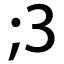
<style>
.page{position:relative;width:64px;height:64px;background:#ffffff}
.page>*{position:absolute;margin:0}
.t1{font:72px "MyriadPro-Regular";color:#000000}
</style>
<div class="page">
<p class="t1" style="left:8px;top:3px;width:47px;height:58px">;3</p>
</div>
